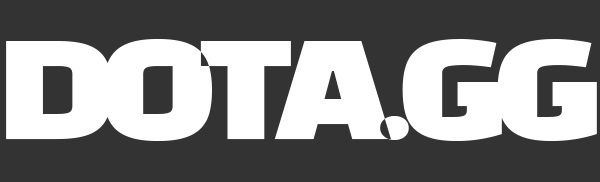
<style>
.page{position:relative;width:600px;height:182px;background:#333333}
.page>*{position:absolute;margin:0}
.t1{font:65.1px "BlackHanSans-Regular";letter-spacing:-0.1em;color:#ffffff;scale:1.18 1}
</style>
<div class="page">
<p class="t1" style="left:6px;top:39px;width:591px;height:102px">DOTA.GG</p>
</div>
